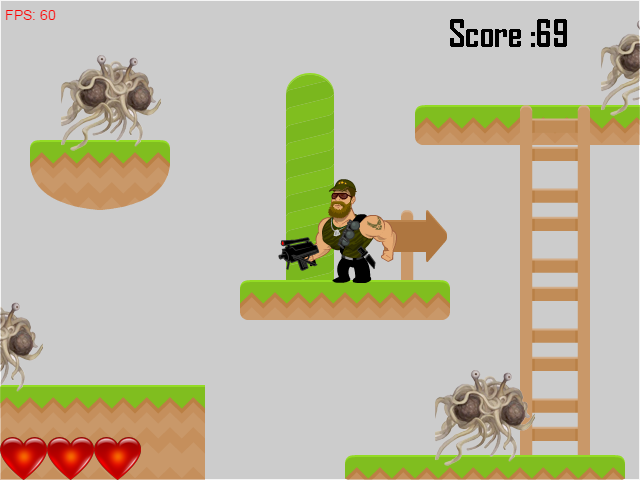
<style>
.page{position:relative;width:640px;height:480px;background:#cccccc}
.page>*{position:absolute;margin:0}
.t1{font:36px "AgencyFB-Bold";color:#000000}
</style>
<div class="page">
<p class="t1" style="left:450px;top:19px;width:117px;height:28px">69: Score</p>
</div>
